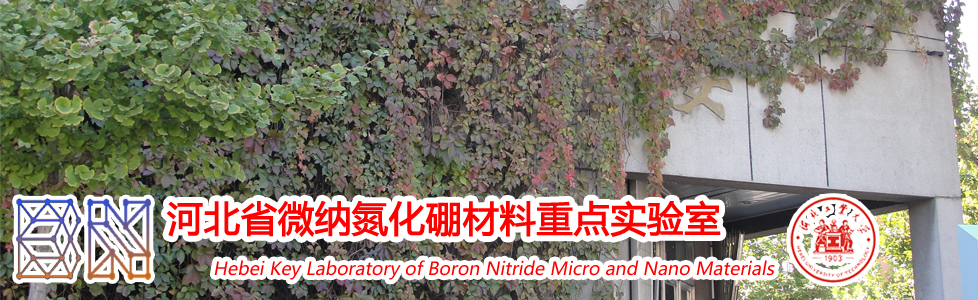
<style>
.page{position:relative;width:978px;height:300px}
.page>*{position:absolute;margin:0}
.t1{font:36px "MicrosoftYaHei";color:#ff0000;font-weight:bold}
.t2{font:18px "MicrosoftYaHei";color:#ff0000;font-style:italic}
</style>
<div class="page">
<p class="t1" style="left:166px;top:200px;width:555px;height:37px">河北省微纳氮化硼材料重点实验室</p>
<p class="t2" style="left:214px;top:260px;width:561px;height:20px">Hebei Key Laboratory of Boron Nitride Micro and Nano Materials</p>
</div>
